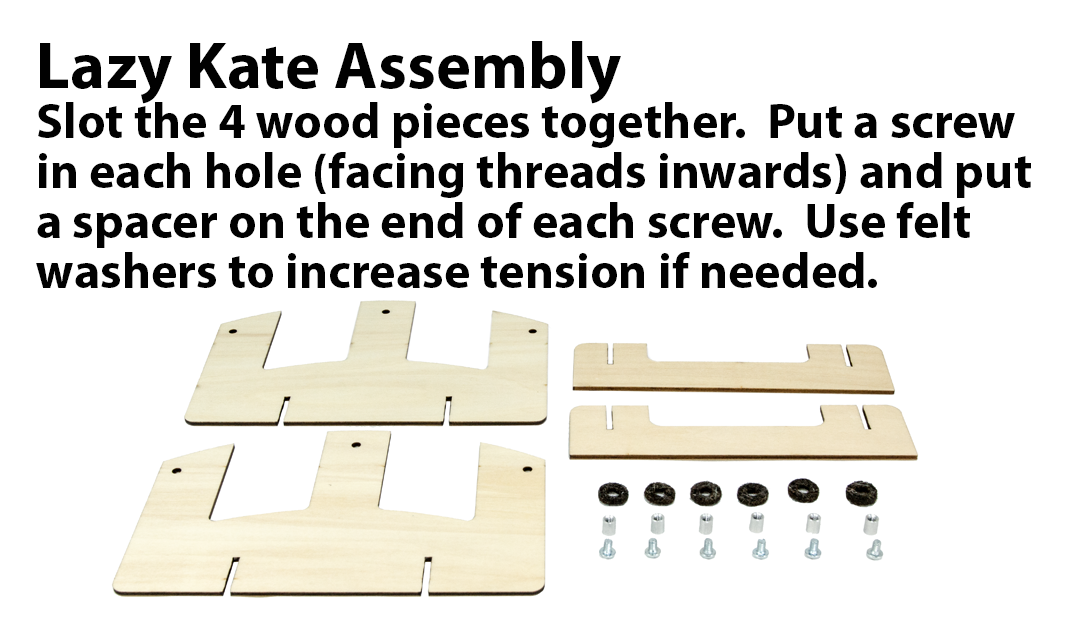
<style>
.page{position:relative;width:1085px;height:635px;background:#ffffff}
.page>*{position:absolute;margin:0}
.t1{font:50px/50px "MyriadPro-Bold";color:#010101}
.t2{font:66.7px/50px "MyriadPro-Bold";color:#010101}
</style>
<div class="page">
<p class="t1" style="left:36px;top:41px;width:995px;height:247px"><span class="t2">Lazy Kate Assembly<br></span>Slot the 4 wood pieces together.  Put a screw<br>in each hole (facing threads inwards) and put<br>a spacer on the end of each screw.  Use felt <br>washers to increase tension if needed.</p>
</div>
